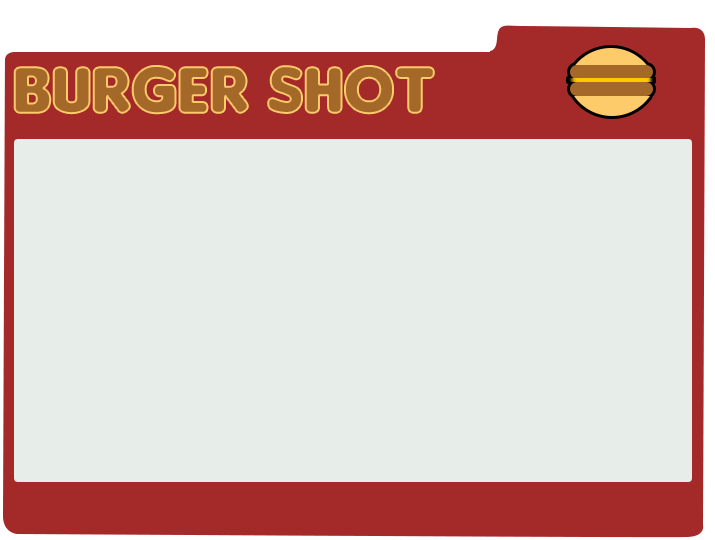
<style>
.page{position:relative;width:715px;height:540px;background:#e7ede9}
.page>*{position:absolute;margin:0}
.t1{font:69px "Insaniburger";letter-spacing:0.01em;color:#a46929}
</style>
<div class="page">
<p class="t1" style="left:14px;top:66px;width:420px;height:48px">Burger Shot</p>
</div>
